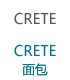
<style>
.page{position:relative;width:70px;height:80px;background:#ffffff}
.page>*{position:absolute;margin:0}
.t1{font:14.4px "MicrosoftYaHei";color:#585554}
.t2{font:14.4px "MicrosoftYaHei";color:#00758e}
.t3{font:13px "MicrosoftYaHei";color:#00758e}
</style>
<div class="page">
<p class="t1" style="left:14px;top:12px;width:42px;height:13px">CRETE</p>
<p class="t2" style="left:14px;top:44px;width:42px;height:13px">CRETE</p>
<p class="t3" style="left:22px;top:63px;width:26px;height:13px">面包</p>
</div>
